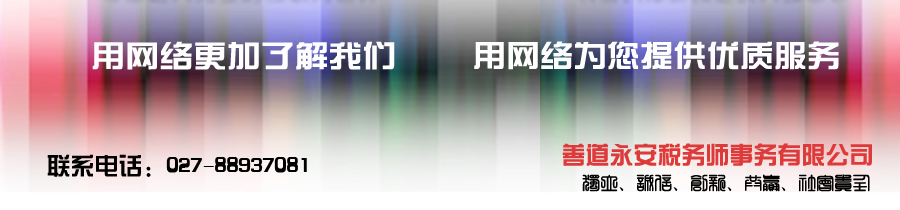
<style>
.page{position:relative;width:900px;height:210px}
.page>*{position:absolute;margin:0}
.t1{font:30px "ç»å¸ç»¼èºä½ç®-regular";color:#fefefe;scale:1.13 1}
.t2{font:30px "ç»å¸ç»¼èºä½ç®-regular";color:#fefefe;scale:1.11 1}
.t3{font:24px "ç»å¸ç»¼èºä½ç®-regular";color:#de3a3a}
.t4{font:24px "ç»å¸ç»¼èºä½ç®-regular";color:#000000}
.t5{font:18px "¾­µä·±·½×­ Regular";color:#000000}
</style>
<div class="page">
<p class="t1" style="left:92px;top:41px;width:303px;height:29px">用网络更加了解我们</p>
<p class="t2" style="left:474px;top:41px;width:365px;height:29px">用网络为您提供优质服务</p>
<p class="t3" style="left:562px;top:143px;width:310px;height:23px">善道永安税务师事务有限公司</p>
<p class="t4" style="left:47px;top:154px;width:260px;height:23px">联系电话：027-88937081</p>
<p class="t5" style="left:582px;top:174px;width:288px;height:18px">独立、诚信、创新、共赢、社会责任</p>
</div>
